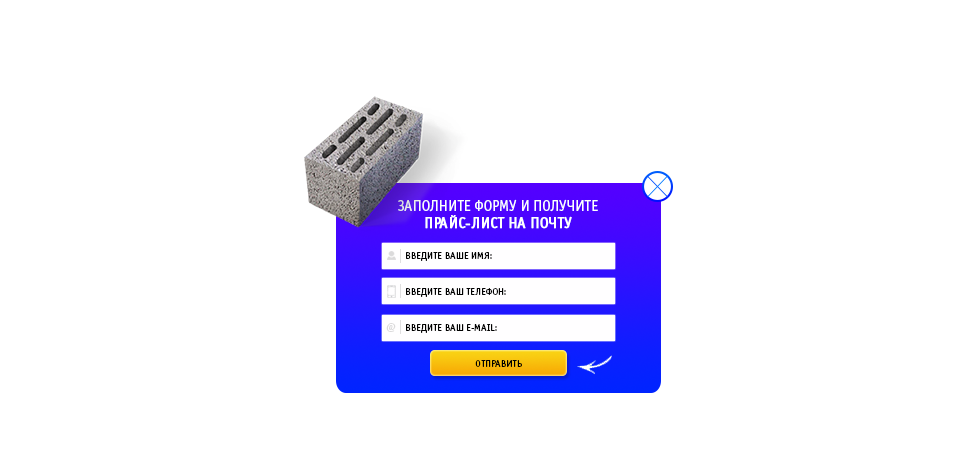
<style>
.page{position:relative;width:980px;height:460px;background:#ffffff}
.page>*{position:absolute;margin:0}
.t1{font:15px/17px "OfficinaSansC-Book";color:#ffffff;text-transform:uppercase}
.t2{font:15px/17px "OfficinaSansC-Book";color:#ffffff;text-transform:uppercase;font-weight:bold}
.t3{font:10px "OfficinaSansC-Book";color:#000000;text-transform:uppercase}
.t4{font:10px "OfficinaSansC-Book";color:#dbdadb;text-transform:uppercase}
</style>
<div class="page">
<p class="t1" style="left:398px;top:199px;width:200px;height:30px;text-align:center">Заполните форму и получите<span class="t2"><br>Прайс-лист на почту</span></p>
<p class="t3" style="left:406px;top:252px;width:86px;height:9px">введите ваше имя:</p>
<p class="t3" style="left:406px;top:288px;width:100px;height:9px">введите ваш телефон:</p>
<p class="t4" style="left:386px;top:323px;width:10px;height:9px">@</p>
<p class="t3" style="left:406px;top:324px;width:91px;height:9px">введите ваш E-mail:</p>
<p class="t3" style="left:475px;top:360px;width:47px;height:7px">Отправить</p>
</div>
